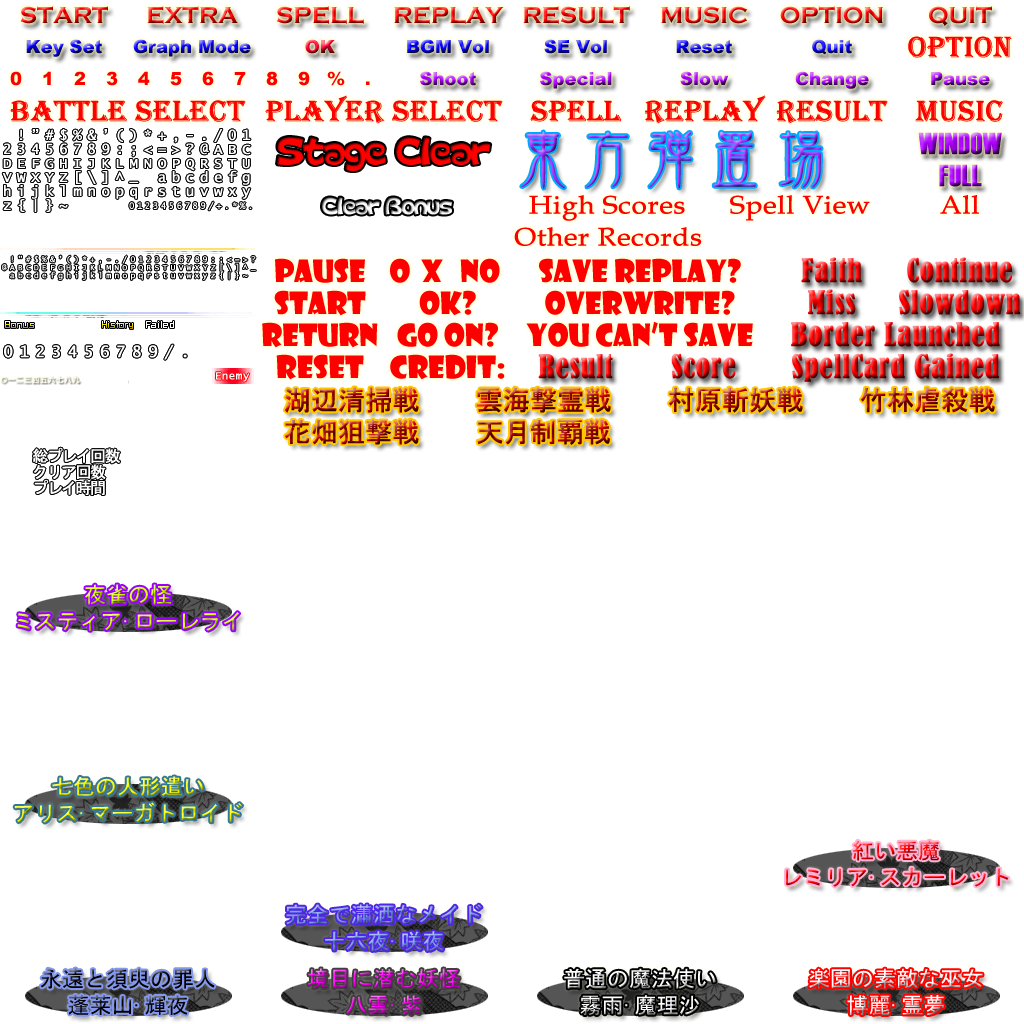
<style>
.page{position:relative;width:1024px;height:1024px;background:#ffffff}
.page>*{position:absolute;margin:0}
.t1{font:24px "CopperplateGothic-Bold"}
.t2{font:18px "Arial-Black"}
.t3{font:30px "Algerian";color:#ff0000;font-weight:bold}
.t4{font:18px "Arial-Black";color:#ff0000}
.t5{font:34.2px "ColopocleAlphabet";letter-spacing:-0.08em;color:#ff0000;scale:0.95 1}
.t6{font:60.5px "DFKinBun-W3-WIN-RKSJ-H";font-weight:bold;scale:1.09 1}
.t7{font:30px "Haettenschweiler";font-weight:bold}
.t8{font:20.9px "ColopocleAlphabet";letter-spacing:-0.08em;scale:0.95 1}
.t9{font:25.2px "BookAntiqua";color:#ff0000;font-weight:bold;scale:1.11 1}
.t10{font:30px "BernardMT-Condensed";font-weight:bold}
.t11{font:30px "ShowcardGothic-Reg";color:#ff0000}
.t12{font:11px "LucidaConsole";color:#ffffff;font-weight:bold}
.t13{font:27px "MS-UIGothic";font-weight:bold}
.t14{font:22px "MS-Gothic"}
</style>
<div class="page">
<p class="t1" style="left:20px;top:6px;width:88px;height:18px">START</p>
<p class="t1" style="left:147px;top:6px;width:91px;height:18px">EXTRA</p>
<p class="t1" style="left:277px;top:6px;width:87px;height:18px">SPELL</p>
<p class="t1" style="left:394px;top:6px;width:110px;height:18px">REPLAY</p>
<p class="t1" style="left:523px;top:6px;width:107px;height:18px">RESULT</p>
<p class="t1" style="left:661px;top:6px;width:87px;height:18px">MUSIC</p>
<p class="t1" style="left:780px;top:6px;width:103px;height:18px">OPTION</p>
<p class="t1" style="left:929px;top:6px;width:63px;height:20px">QUIT</p>
<p class="t2" style="left:26px;top:39px;width:76px;height:18px">Key Set</p>
<p class="t2" style="left:133px;top:39px;width:118px;height:18px">Graph Mode</p>
<p class="t2" style="left:305px;top:39px;width:30px;height:15px">OK</p>
<p class="t2" style="left:407px;top:39px;width:82px;height:15px">BGM Vol</p>
<p class="t2" style="left:544px;top:39px;width:63px;height:15px">SE Vol</p>
<p class="t2" style="left:676px;top:40px;width:56px;height:14px">Reset</p>
<p class="t2" style="left:812px;top:39px;width:40px;height:16px">Quit</p>
<p class="t3" style="left:908px;top:36px;width:104px;height:22px">Option</p>
<p class="t4" style="left:10px;top:71px;width:12px;height:15px">0</p>
<p class="t4" style="left:43px;top:71px;width:8px;height:14px">1</p>
<p class="t4" style="left:74px;top:71px;width:11px;height:14px">2</p>
<p class="t4" style="left:106px;top:71px;width:12px;height:15px">3</p>
<p class="t4" style="left:138px;top:71px;width:12px;height:14px">4</p>
<p class="t4" style="left:170px;top:72px;width:12px;height:14px">5</p>
<p class="t4" style="left:202px;top:71px;width:12px;height:15px">6</p>
<p class="t4" style="left:234px;top:72px;width:12px;height:13px">7</p>
<p class="t4" style="left:266px;top:71px;width:12px;height:15px">8</p>
<p class="t4" style="left:298px;top:71px;width:12px;height:15px">9</p>
<p class="t4" style="left:327px;top:71px;width:18px;height:15px">%</p>
<p class="t2" style="left:420px;top:71px;width:56px;height:15px">Shoot</p>
<p class="t2" style="left:540px;top:71px;width:72px;height:18px">Special</p>
<p class="t2" style="left:680px;top:71px;width:49px;height:15px">Slow</p>
<p class="t2" style="left:795px;top:71px;width:74px;height:18px">Change</p>
<p class="t2" style="left:931px;top:72px;width:59px;height:14px">Pause</p>
<p class="t4" style="left:366px;top:81px;width:4px;height:4px">.</p>
<p class="t3" style="left:10px;top:100px;width:236px;height:22px">Battle Select</p>
<p class="t3" style="left:265px;top:95px;width:238px;height:29px">Player Select</p>
<p class="t3" style="left:530px;top:100px;width:92px;height:22px">Spell</p>
<p class="t3" style="left:645px;top:95px;width:121px;height:29px">Replay</p>
<p class="t3" style="left:776px;top:100px;width:112px;height:24px">Result</p>
<p class="t3" style="left:915px;top:100px;width:88px;height:22px">Music</p>
<p class="t5" style="left:277px;top:137px;width:214px;height:34px">Stage Clear</p>
<p class="t6" style="left:521px;top:131px;width:44px;height:58px">東</p>
<p class="t6" style="left:586px;top:132px;width:42px;height:56px">方</p>
<p class="t6" style="left:649px;top:131px;width:43px;height:58px">弾</p>
<p class="t6" style="left:713px;top:131px;width:43px;height:56px">置</p>
<p class="t6" style="left:780px;top:132px;width:42px;height:56px">場</p>
<p class="t7" style="left:918px;top:132px;width:84px;height:23px">WINDOW</p>
<p class="t7" style="left:939px;top:164px;width:43px;height:23px">FULL</p>
<p class="t8" style="left:322px;top:197px;width:130px;height:18px">Clear Bonus</p>
<p class="t9" style="left:529px;top:195px;width:156px;height:26px">High Scores</p>
<p class="t9" style="left:730px;top:195px;width:140px;height:26px">Spell View</p>
<p class="t9" style="left:940px;top:195px;width:39px;height:19px">All</p>
<p class="t9" style="left:514px;top:227px;width:188px;height:19px">Other Records</p>
<p class="t10" style="left:801px;top:257px;width:61px;height:26px">Faith</p>
<p class="t10" style="left:907px;top:257px;width:105px;height:26px">Continue</p>
<p class="t11" style="left:275px;top:258px;width:90px;height:25px">PAUSE</p>
<p class="t11" style="left:390px;top:258px;width:20px;height:25px">O</p>
<p class="t11" style="left:421px;top:259px;width:22px;height:23px">X</p>
<p class="t11" style="left:460px;top:258px;width:40px;height:25px">NO</p>
<p class="t11" style="left:539px;top:258px;width:202px;height:26px">Save Replay?</p>
<p class="t11" style="left:274px;top:290px;width:92px;height:26px">Start</p>
<p class="t11" style="left:419px;top:290px;width:57px;height:26px">OK?</p>
<p class="t11" style="left:545px;top:290px;width:190px;height:26px">OverWrite?</p>
<p class="t10" style="left:808px;top:289px;width:48px;height:26px">Miss</p>
<p class="t10" style="left:899px;top:289px;width:122px;height:26px">Slowdown</p>
<p class="t11" style="left:262px;top:322px;width:116px;height:26px">Return</p>
<p class="t11" style="left:397px;top:322px;width:101px;height:25px">Go On?</p>
<p class="t11" style="left:526px;top:321px;width:227px;height:26px">You Can’t Save</p>
<p class="t10" style="left:791px;top:322px;width:209px;height:25px">Border Launched</p>
<p class="t10" style="left:671px;top:353px;width:65px;height:26px">Score</p>
<p class="t10" style="left:792px;top:353px;width:207px;height:29px">SpellCard Gained</p>
<p class="t11" style="left:276px;top:354px;width:88px;height:26px">Reset</p>
<p class="t11" style="left:390px;top:354px;width:115px;height:26px">Credit:</p>
<p class="t10" style="left:538px;top:354px;width:75px;height:25px">Result</p>
<p class="t12" style="left:216px;top:372px;width:34px;height:10px">Enemy</p>
<p class="t13" style="left:284px;top:387px;width:135px;height:26px">湖辺清掃戦</p>
<p class="t13" style="left:476px;top:387px;width:135px;height:26px">雲海撃霊戦</p>
<p class="t13" style="left:668px;top:387px;width:135px;height:26px">村原斬妖戦</p>
<p class="t13" style="left:860px;top:387px;width:135px;height:26px">竹林虐殺戦</p>
<p class="t13" style="left:285px;top:419px;width:134px;height:26px">花畑狙撃戦</p>
<p class="t13" style="left:477px;top:419px;width:133px;height:26px">天月制覇戦</p>
<p class="t14" style="left:17px;top:584px;width:223px;height:47px;text-align:center">夜雀の怪<br>ミスティア·ローレライ</p>
<p class="t14" style="left:14px;top:776px;width:229px;height:47px;text-align:center">七色の人形遣い<br>アリス·マーガトロイド</p>
<p class="t14" style="left:786px;top:840px;width:223px;height:47px;text-align:center">紅い悪魔<br>レミリア·スカーレット</p>
<p class="t14" style="left:40px;top:968px;width:175px;height:47px;text-align:center">永遠と須臾の罪人<br>蓬莱山·輝夜</p>
<p class="t14" style="left:308px;top:968px;width:152px;height:47px;text-align:center">境目に潜む妖怪<br>八雲·紫</p>
<p class="t14" style="left:564px;top:968px;width:152px;height:47px;text-align:center">普通の魔法使い<br>霧雨·魔理沙</p>
<p class="t14" style="left:809px;top:968px;width:174px;height:48px;text-align:center">楽園の素敵な巫女<br>博麗·霊夢</p>
</div>
